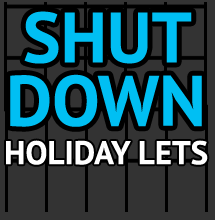
<style>
.page{position:relative;width:215px;height:220px;background:#333333}
.page>*{position:absolute;margin:0}
.t1{font:71.2px/63.3px "PTSans-Bold";color:#00bff3}
.t2{font:32.9px "PTSans-Bold";color:#ffffff}
</style>
<div class="page">
<p class="t1" style="left:10px;top:11px;width:192px;height:116px;text-align:center">SHUT<br>DOWN</p>
<p class="t2" style="left:6px;top:140px;width:202px;height:25px">HOLIDAY LETS</p>
</div>
